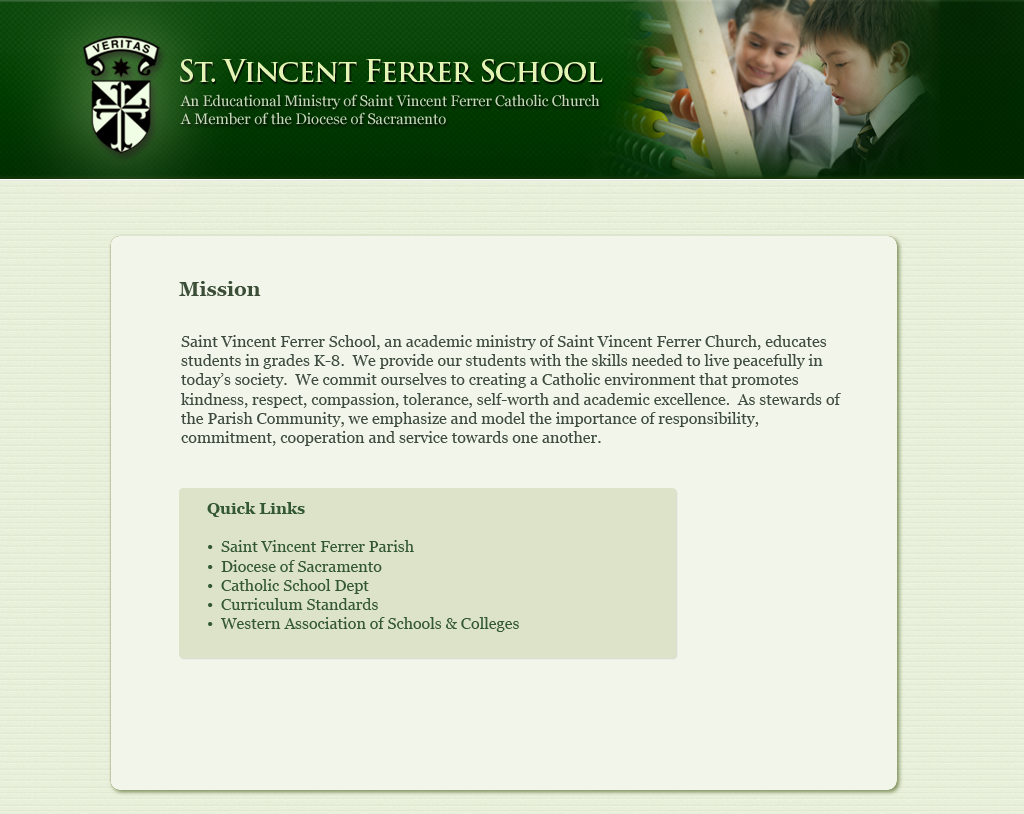
<style>
.page{position:relative;width:1024px;height:814px;background:#f2f6ea}
.page>*{position:absolute;margin:0}
.t1{font:30px "TrajanPro-Bold";letter-spacing:-0.04em;color:#e3f4b4;font-variant:small-caps}
.t2{font:15px/18px "Georgia";letter-spacing:-0.01em;color:#c5d6b8}
.t3{font:15px/18px "Georgia";color:#c5d6b8}
.t4{font:20px "Georgia-Bold";color:#3c4e37}
.t5{font:16px "Georgia";color:#3e4b3e}
.t6{font:16px "Georgia";color:#335833}
.t7{font:16px "Georgia-Bold";color:#335833}
</style>
<div class="page">
<p class="t1" style="left:180px;top:59px;width:423px;height:23px">St. Vincent Ferrer School</p>
<p class="t2" style="left:180px;top:94px;width:420px;height:31px">An Educational Ministry of Saint Vincent Ferrer Catholic Church<br><span class="t3">A Member of the Diocese of Sacramento</span></p>
<p class="t4" style="left:179px;top:281px;width:82px;height:15px">Mission</p>
<p class="t5" style="left:180px;top:335px;width:661px;height:111px">Saint Vincent Ferrer School, an academic ministry of Saint Vincent Ferrer Church, educates students in grades K-8.  We provide our students with the skills needed to live peacefully in today’s society.  We commit ourselves to creating a Catholic environment that promotes kindness, respect, compassion, tolerance, self-worth and academic excellence.  As stewards of the Parish Community, we emphasize and model the importance of responsibility, commitment, cooperation and service towards one another.</p>
<p class="t6" style="left:207px;top:502px;width:312px;height:130px"><span class="t7">Quick Links<br><br></span>•  Saint Vincent Ferrer Parish<br>•  Diocese of Sacramento<br>•  Catholic School Dept<br>•  Curriculum Standards<br>•  Western Association of Schools &amp; Colleges</p>
</div>
